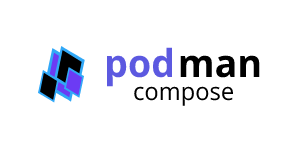
<style>
.page{position:relative;width:300px;height:150px;background:#ffffff}
.page>*{position:absolute;margin:0}
.t1{font:38.4px "OpenSans-Bold";color:#5c59e0}
.t2{font:38.4px "OpenSans-Bold";color:#000000}
.t3{font:24.2px "OpenSans-Regular";color:#000000}
</style>
<div class="page">
<p class="t1" style="left:107px;top:47px;width:66px;height:40px">pod</p>
<p class="t2" style="left:180px;top:55px;width:80px;height:23px">man</p>
<p class="t3" style="left:134px;top:86px;width:99px;height:20px">compose</p>
</div>
